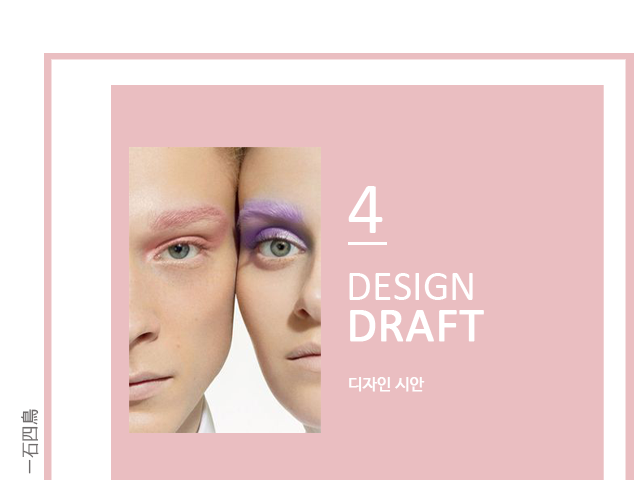
<style>
.page{position:relative;width:640px;height:480px;background:#eabec1}
.page>*{position:absolute;margin:0}
.t1{font:74.2px "Calibri";color:#ffffff}
.t2{font:42.2px "Calibri";color:#ffffff}
.t3{font:48.8px "Calibri";color:#ffffff;font-weight:bold}
.t4{font:15.7px "NanumBarunGothic";color:#fefefe;font-weight:bold}
.t5{font:18.5px "NanumBarunGothic";color:#6f6c6c}
</style>
<div class="page">
<p class="t1" style="left:348px;top:186px;width:35px;height:47px">4</p>
<p class="t2" style="left:349px;top:273px;width:124px;height:27px">DESIGN</p>
<p class="t3" style="left:350px;top:310px;width:134px;height:32px">DRAFT</p>
<p class="t4" style="left:349px;top:377px;width:76px;height:15px">디자인 시안</p>
<p class="t5" style="left:21px;top:409px;width:18px;height:65px;rotate:-90deg">一石四鳥</p>
</div>
